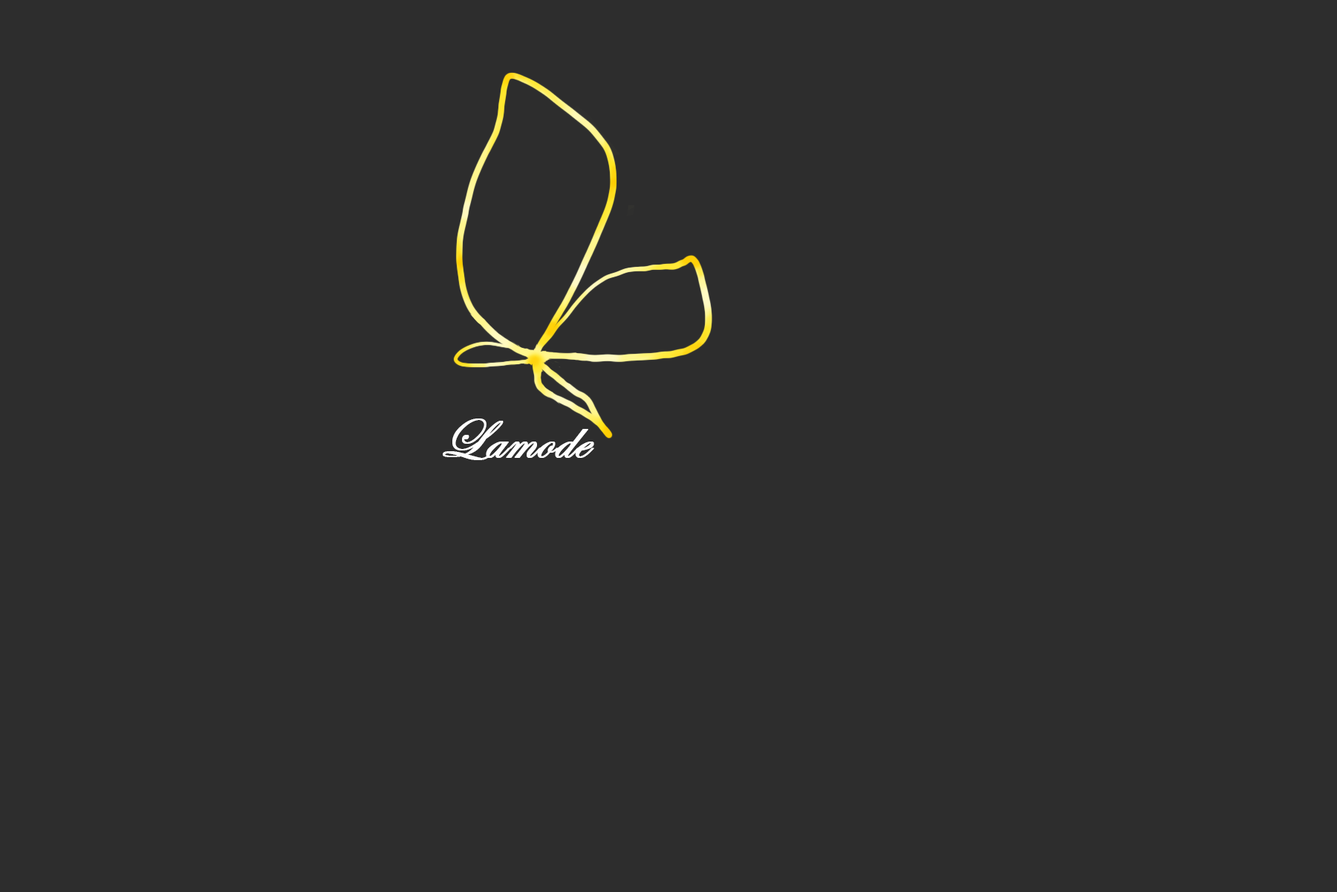
<style>
.page{position:relative;width:1337px;height:892px;background:#2d2d2d}
.page>*{position:absolute;margin:0}
.t1{font:55.7px "EdwardianScriptITC";color:#ffffff;font-weight:bold;font-style:italic}
</style>
<div class="page">
<p class="t1" style="left:443px;top:418px;width:151px;height:42px">Lamode</p>
</div>
